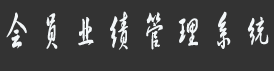
<style>
.page{position:relative;width:274px;height:71px;background:#333333}
.page>*{position:absolute;margin:0}
.t1{font:42px "FZHCJW--GB1-0";letter-spacing:0.2em;color:#f3f7f9;font-weight:bold;scale:0.67 1}
</style>
<div class="page">
<p class="t1" style="left:6px;top:11px;width:263px;height:39px">会员业绩管理系统</p>
</div>
